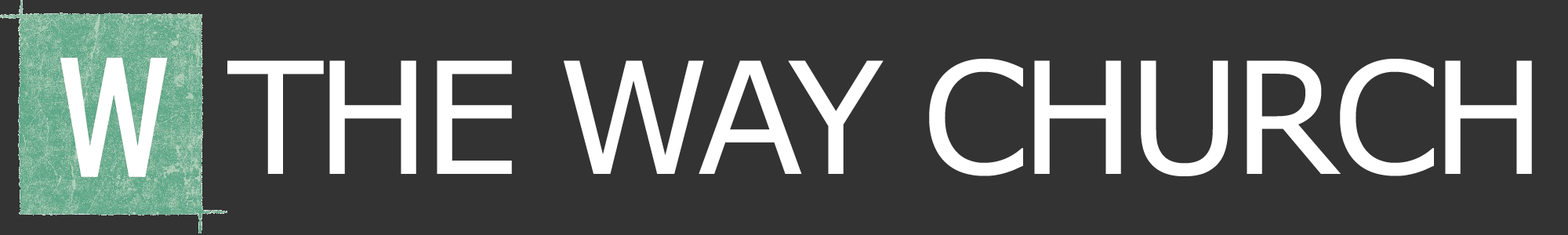
<style>
.page{position:relative;width:1568px;height:235px;background:#333333}
.page>*{position:absolute;margin:0}
.t1{font:155.8px "Verdana";letter-spacing:-0.06em;color:#ffffff;text-transform:uppercase}
</style>
<div class="page">
<p class="t1" style="left:227px;top:59px;width:1305px;height:117px">The way church</p>
</div>
